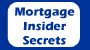
<style>
.page{position:relative;width:90px;height:50px;background:#ffffff}
.page>*{position:absolute;margin:0}
.t1{font:12px "ErasITC-Bold";letter-spacing:0.01em;color:#003399}
</style>
<div class="page">
<p class="t1" style="left:15px;top:7px;width:60px;height:38px;text-align:center">Mortgage<br>Insider<br>Secrets</p>
</div>
